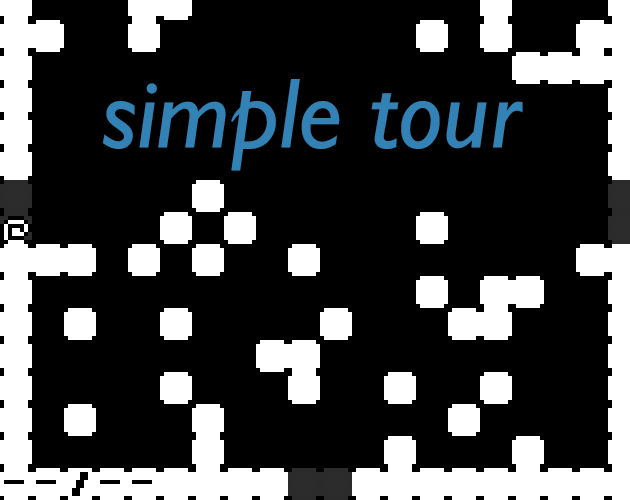
<style>
.page{position:relative;width:630px;height:500px;background:#000000}
.page>*{position:absolute;margin:0}
.t1{font:100px "GillSans-Italic";color:#3282b5}
</style>
<div class="page">
<p class="t1" style="left:103px;top:79px;width:420px;height:92px">simple tour</p>
</div>
